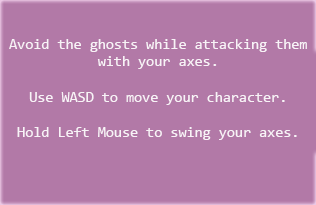
<style>
.page{position:relative;width:316px;height:205px;background:#b279a7}
.page>*{position:absolute;margin:0}
.t1{font:14.7px "Consolas";color:#f8f3f7}
</style>
<div class="page">
<p class="t1" style="left:9px;top:39px;width:298px;height:101px;text-align:center">Avoid the ghosts while attacking them with your axes.<br><br>Use WASD to move your character.<br><br>Hold Left Mouse to swing your axes.</p>
</div>
